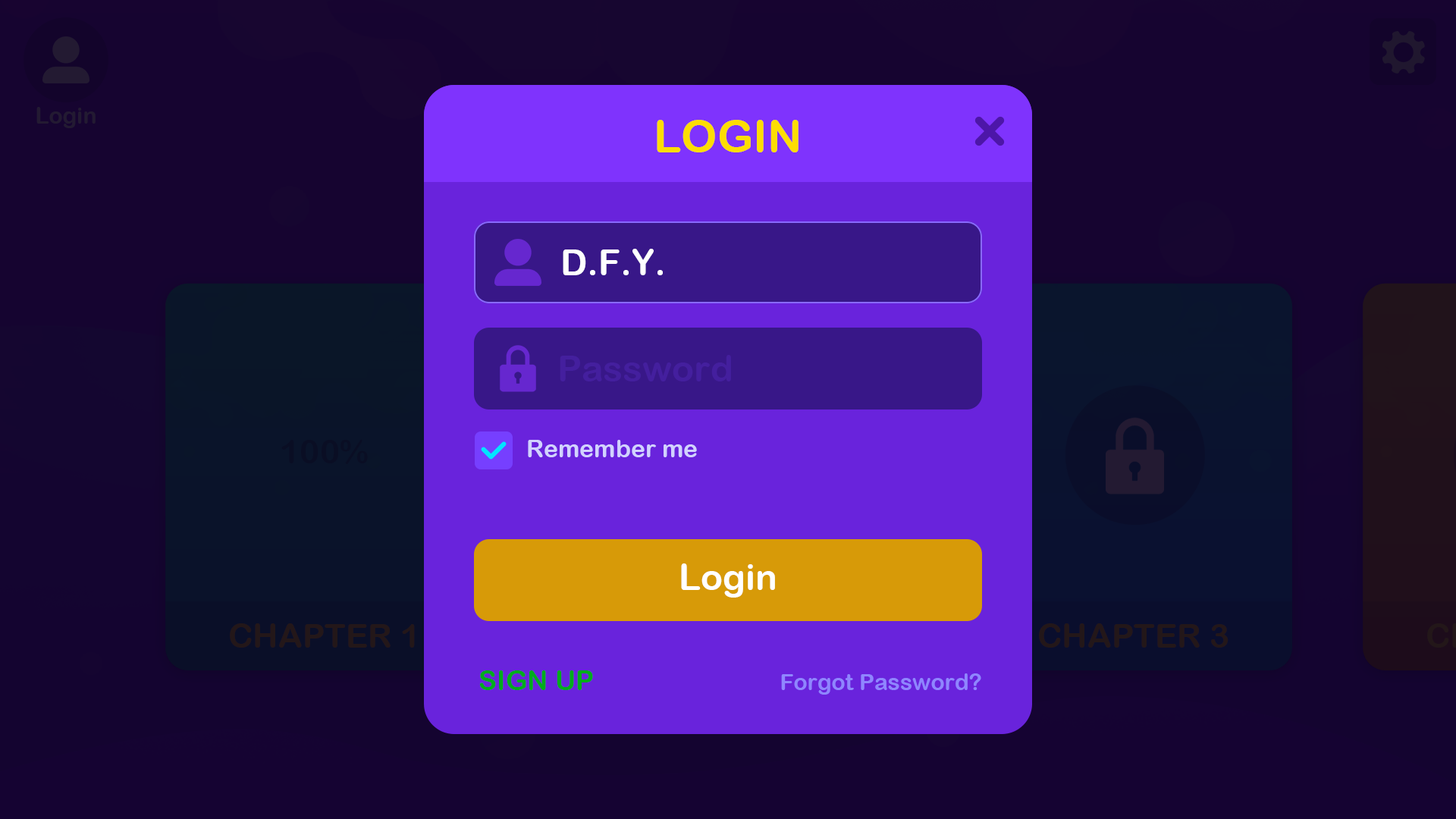
<style>
.page{position:relative;width:1456px;height:819px}
.page>*{position:absolute;margin:0}
.t1{font:45.5px "ArialRoundedMTBold";color:#fddd02}
.t2{font:36.4px "ArialRoundedMTBold";color:#ffffff}
.t3{font:36.4px "ArialRoundedMTBold";color:#441f9e}
.t4{font:24.3px "ArialRoundedMTBold";color:#d2d2ff}
.t5{font:27.3px "ArialRoundedMTBold";color:#01ac1c}
.t6{font:22.7px "ArialRoundedMTBold";color:#8f86ff}
</style>
<div class="page">
<p class="t1" style="left:657px;top:120px;width:142px;height:32px">LOGIN</p>
<p class="t2" style="left:563px;top:249px;width:100px;height:26px">D.F.Y.</p>
<p class="t3" style="left:560px;top:355px;width:171px;height:26px">Password</p>
<p class="t4" style="left:528px;top:440px;width:169px;height:17px">Remember me</p>
<p class="t2" style="left:681px;top:563px;width:94px;height:35px">Login</p>
<p class="t5" style="left:479px;top:670px;width:114px;height:20px">SIGN UP</p>
<p class="t6" style="left:781px;top:673px;width:200px;height:22px">Forgot Password?</p>
</div>
